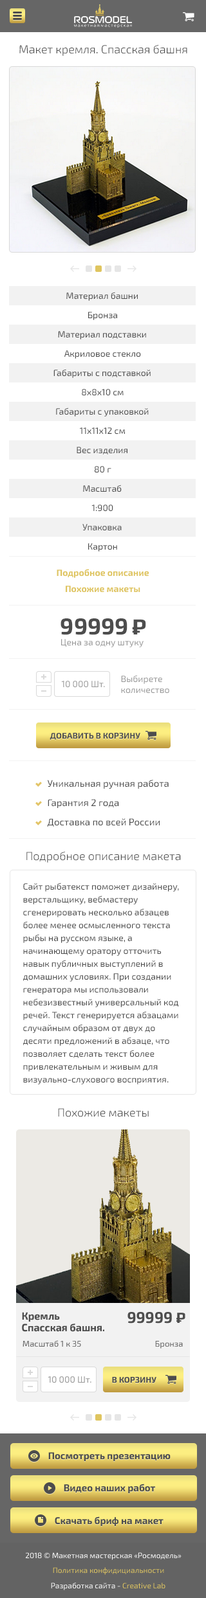
<style>
.page{position:relative;width:206px;height:1598px;background:#ffffff}
.page>*{position:absolute;margin:0}
.t1{font:11.6px "Exo2-Light";color:#4d4d4d}
.t2{font:9px/38.6px "Exo2-Regular";color:#4d4d4d}
.t3{font:9px "Exo2-Bold";color:#dfc560}
.t4{font:23.1px "Exo2-Bold";color:#4d4d4d}
.t5{font:23.1px "Play-Bold";color:#4d4d4d}
.t6{font:9px "Exo2-Regular";color:#999999}
.t7{font:8.4px "Exo2-Bold";color:#4d4d4d;text-transform:uppercase}
.t8{font:9.6px/19.3px "Exo2-Regular";color:#4d4d4d}
.t9{font:9px/12.9px "Exo2-Regular";color:#4d4d4d}
</style>
<div class="page">
<p class="t1" style="left:19px;top:44px;width:168px;height:12px">Макет кремля. Спасская башня</p>
<p class="t2" style="left:53px;top:292px;width:97px;height:239px;text-align:center">Материал башни<br>Материал подставки<br>Габариты с подставкой<br>Габариты с упаковкой<br>Вес изделия<br>Масштаб<br>Упаковка</p>
<p class="t2" style="left:64px;top:312px;width:77px;height:240px;text-align:center">Бронза<br>Акриловое стекло<br>8х8х10 см<br>11х11х12 cм<br>80 г<br>1:900<br>Картон</p>
<p class="t3" style="left:57px;top:569px;width:91px;height:9px">Подробное описание</p>
<p class="t3" style="left:66px;top:586px;width:74px;height:7px">Похожие макеты</p>
<p class="t4" style="left:60px;top:618px;width:86px;height:17px">99999 <span class="t5">₽</span></p>
<p class="t6" style="left:61px;top:639px;width:82px;height:8px">Цена за одну штуку</p>
<p class="t6" style="left:121px;top:675px;width:48px;height:19px">Выбирете <br>количество</p>
<p class="t6" style="left:61px;top:681px;width:44px;height:7px">10 000 Шт.</p>
<p class="t7" style="left:49px;top:733px;width:91px;height:7px">добавить в корзину</p>
<p class="t8" style="left:47px;top:780px;width:121px;height:47px">Уникальная ручная работа<br>Гарантия 2 года<br>Доставка по всей России</p>
<p class="t1" style="left:26px;top:851px;width:155px;height:12px">Подробное описание макета</p>
<p class="t9" style="left:23px;top:883px;width:156px;height:201px">Сайт рыбатекст поможет дизайнеру, верстальщику, вебмастеру сгенерировать несколько абзацев более менее осмысленного текста рыбы на русском языке, а начинающему оратору отточить навык публичных выступлений в домашних условиях. При создании генератора мы использовали небезизвестный универсальный код речей. Текст генерируется абзацами случайным образом от двух до десяти предложений в абзаце, что позволяет сделать текст более привлекательным и живым для визуально-слухового восприятия.<br><br>По своей сути рыбатекст является альтернативой традиционному lorem ipsum, который вызывает у некторых людей недоумение при попытках прочитать рыбу текст. В отличии от lorem ipsum, текст рыба на русском языке наполнит любой макет непонятным смыслом и придаст неповторимый колорит советских времен.</p>
<p class="t1" style="left:58px;top:1108px;width:90px;height:9px">Похожие макеты</p>
</div>
